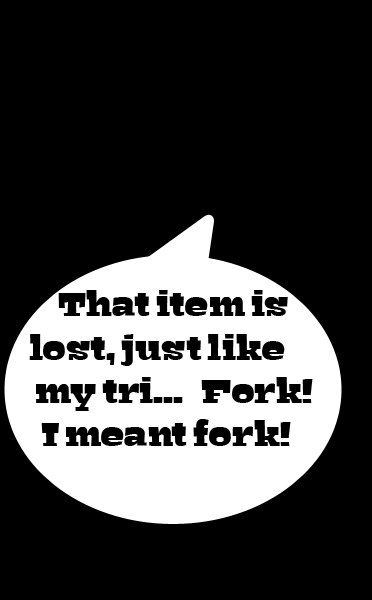
<style>
.page{position:relative;width:372px;height:600px;background:#000000}
.page>*{position:absolute;margin:0}
.t1{font:36px "Bigfish-Black";color:#000000}
</style>
<div class="page">
<p class="t1" style="left:29px;top:290px;width:284px;height:156px">That item is <br>lost, just like <br> my tri...   Fork! <br>  I meant fork!</p>
</div>
